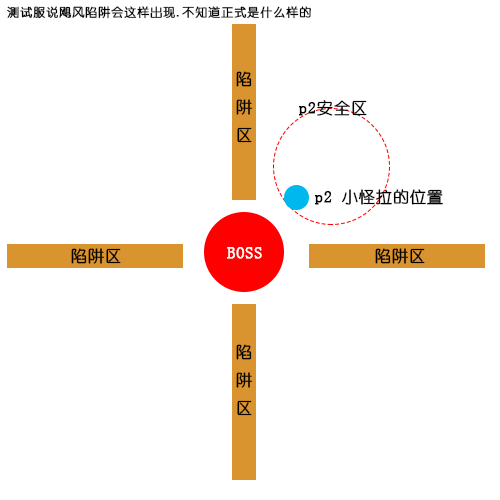
<style>
.page{position:relative;width:500px;height:500px;background:#ffffff}
.page>*{position:absolute;margin:0}
.t1{font:12px "YouYuan";color:#000000;font-weight:bold}
.t2{font:16px "YouYuan";color:#000000;font-weight:bold}
.t3{font:16px "YouYuan";color:#ffffff;font-weight:bold}
</style>
<div class="page">
<p class="t1" style="left:7px;top:6px;width:304px;height:13px">测试服说飓风陷阱会这样出现.不知道正式是什么样的</p>
<p class="t2" style="left:236px;top:71px;width:17px;height:72px;text-align:center">陷<br>阱<br>区</p>
<p class="t2" style="left:298px;top:100px;width:69px;height:16px">p2安全区</p>
<p class="t2" style="left:314px;top:189px;width:129px;height:16px">p2 小怪拉的位置</p>
<p class="t2" style="left:71px;top:248px;width:50px;height:16px">陷阱区</p>
<p class="t3" style="left:227px;top:247px;width:35px;height:12px">BOSS</p>
<p class="t2" style="left:375px;top:248px;width:50px;height:16px">陷阱区</p>
<p class="t2" style="left:236px;top:344px;width:17px;height:72px;text-align:center">陷<br>阱<br>区</p>
</div>
